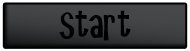
<style>
.page{position:relative;width:190px;height:51px}
.page>*{position:absolute;margin:0}
.t1{font:36px "ARCHRISTY";color:#000000}
</style>
<div class="page">
<p class="t1" style="left:59px;top:10px;width:72px;height:31px">start</p>
</div>
